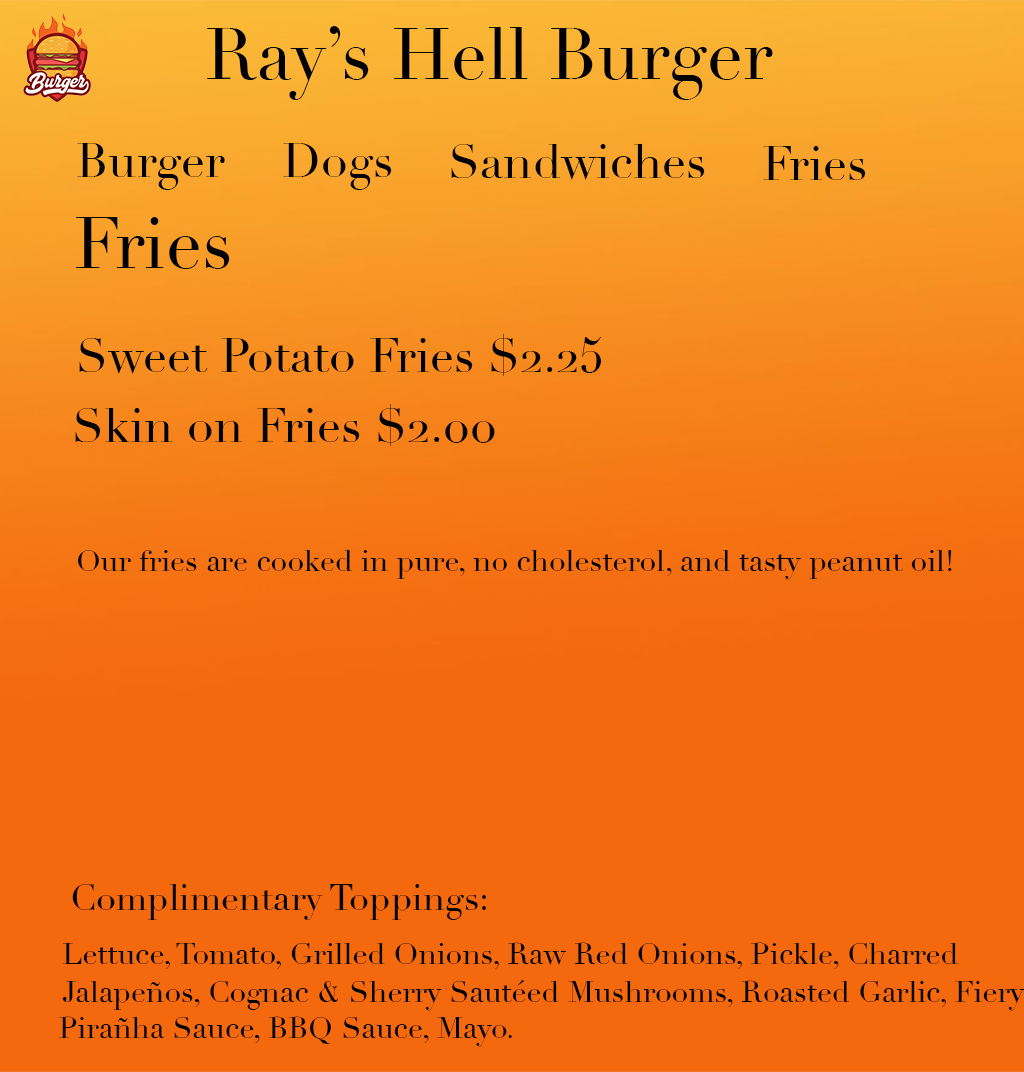
<style>
.page{position:relative;width:1024px;height:1072px;background:#f4690e}
.page>*{position:absolute;margin:0}
.t1{font:72px "Didot";color:#000000}
.t2{font:48px "Didot";color:#000000}
.t3{font:30px "Didot";color:#000000}
.t4{font:36px "Didot";color:#000000}
</style>
<div class="page">
<p class="t1" style="left:207px;top:26px;width:566px;height:74px">Ray’s Hell Burger</p>
<p class="t2" style="left:77px;top:143px;width:148px;height:47px">Burger</p>
<p class="t2" style="left:283px;top:143px;width:109px;height:47px">Dogs</p>
<p class="t2" style="left:451px;top:144px;width:254px;height:36px">Sandwiches</p>
<p class="t2" style="left:763px;top:146px;width:103px;height:34px">Fries</p>
<p class="t1" style="left:76px;top:217px;width:154px;height:52px">Fries</p>
<p class="t2" style="left:79px;top:334px;width:523px;height:42px">Sweet Potato Fries $2.25</p>
<p class="t2" style="left:75px;top:404px;width:420px;height:42px">Skin on Fries $2.00</p>
<p class="t3" style="left:78px;top:550px;width:874px;height:30px">Our fries are cooked in pure, no cholesterol, and tasty peanut oil!</p>
<p class="t4" style="left:72px;top:884px;width:414px;height:36px">Complimentary Toppings:</p>
<p class="t3" style="left:62px;top:942px;width:896px;height:27px">Lettuce, Tomato, Grilled Onions, Raw Red Onions, Pickle, Charred</p>
<p class="t3" style="left:62px;top:980px;width:963px;height:31px">Jalapeños, Cognac &amp; Sherry Sautéed Mushrooms, Roasted Garlic, Fiery</p>
<p class="t3" style="left:59px;top:1016px;width:453px;height:31px">Pirañha Sauce, BBQ Sauce, Mayo.</p>
</div>
